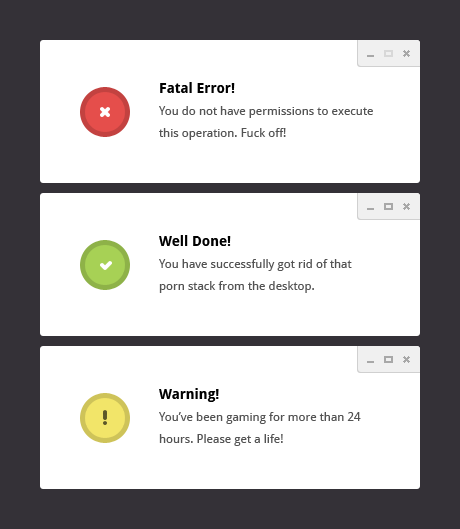
<style>
.page{position:relative;width:460px;height:529px;background:#ffffff}
.page>*{position:absolute;margin:0}
.t1{font:12px/22px "DroidSans";color:#535353}
.t2{font:14px/22px "DroidSans-Bold";color:#000000}
</style>
<div class="page">
<p class="t1" style="left:159px;top:82px;width:214px;height:58px"><span class="t2">Fatal Error!<br></span>You do not have permissions to execute this operation. Fuck off!</p>
<p class="t1" style="left:159px;top:235px;width:193px;height:58px"><span class="t2">Well Done!<br></span>You have successfully got rid of that porn stack from the desktop.</p>
<p class="t1" style="left:159px;top:388px;width:202px;height:58px"><span class="t2">Warning!<br></span>You’ve been gaming for more than 24 hours. Please get a life!</p>
</div>
